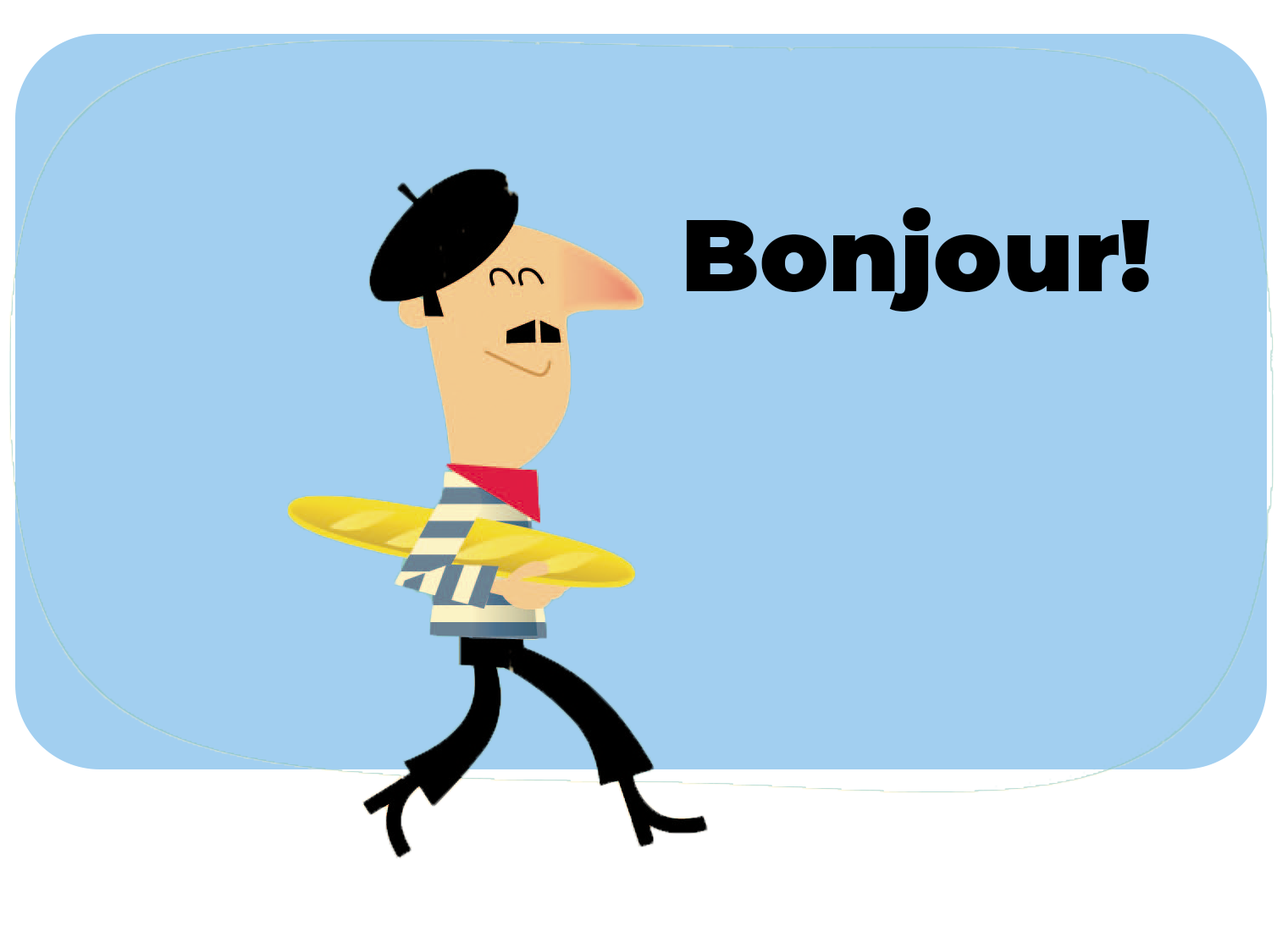
<style>
.page{position:relative;width:1288px;height:926px;background:#a2cff0}
.page>*{position:absolute;margin:0}
.t1{font:101.6px "Montserrat-Black";color:#000000}
</style>
<div class="page">
<p class="t1" style="left:686px;top:207px;width:464px;height:105px">Bonjour!</p>
</div>
